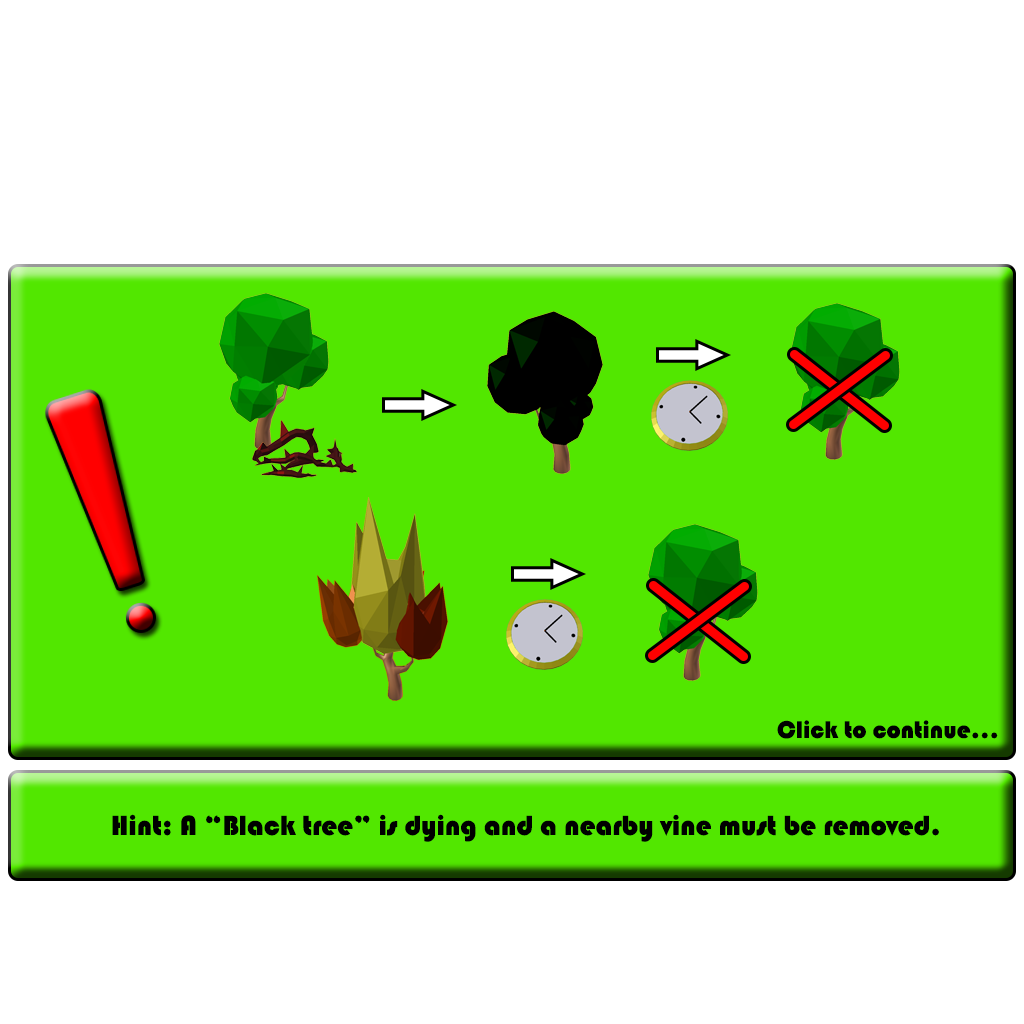
<style>
.page{position:relative;width:1024px;height:1024px;background:#ffffff}
.page>*{position:absolute;margin:0}
.t1{font:25px "Bauhaus93";color:#000000}
.t2{font:28.7px "Bauhaus93";color:#000000}
</style>
<div class="page">
<p class="t1" style="left:777px;top:720px;width:221px;height:19px">Click to continue...</p>
<p class="t2" style="left:112px;top:814px;width:827px;height:28px">Hint: A “Black tree” is dying and a nearby vine must be removed.</p>
</div>
